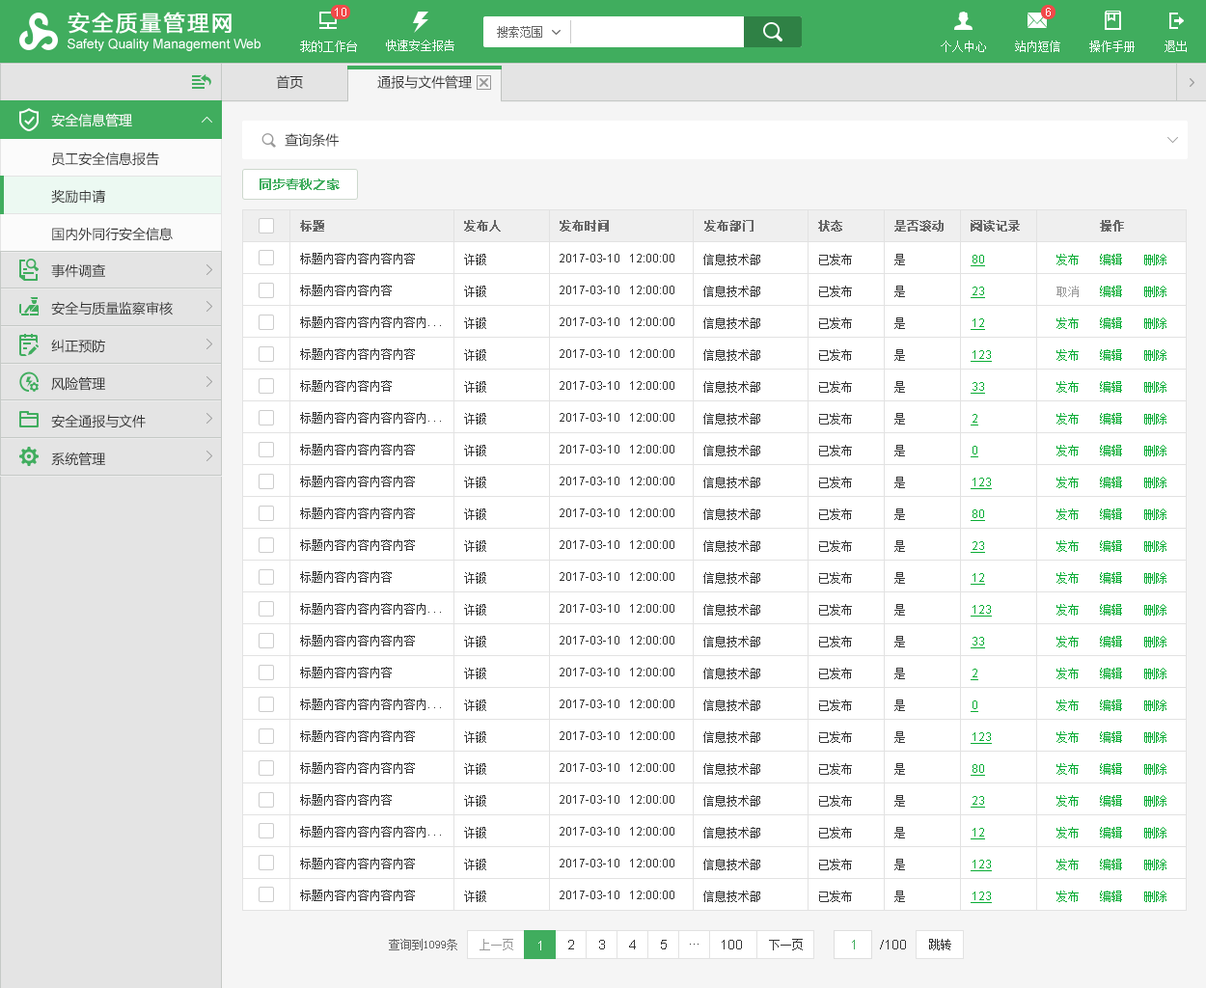
<style>
.page{position:relative;width:1206px;height:988px;background:#ffffff}
.page>*{position:absolute;margin:0}
.t1{font:13.5px "MicrosoftYaHei";color:#333333}
.t2{font:13.5px "MicrosoftYaHei";color:#ffffff}
.t3{font:13.5px/37.6px "MicrosoftYaHei";color:#333333}
.t4{font:13.5px "MicrosoftYaHei-Bold";color:#40ad5e}
.t5{font:11.6px "SimSun";color:#666666;font-weight:bold}
.t6{font:11.6px/31.9px "SimSun";color:#333333}
.t7{font:11.6px/31.9px "ArialMT";color:#333333}
.t8{font:11.6px/31.9px "ArialMT";color:#09ac35;text-decoration:underline}
.t9{font:11.6px/31.9px "SimSun";color:#09ac35}
.t10{font:11.6px/31.9px "SimSun";color:#999999}
.t11{font:11.6px "SimSun";color:#666666}
.t12{font:11.6px "SimSun";color:#999999}
.t13{font:13.5px "ArialMT";color:#ffffff}
.t14{font:13.5px "ArialMT";color:#333333}
.t15{font:11.6px "SimSun";color:#333333}
.t16{font:13.5px "ArialMT";color:#40ad5e}
</style>
<div class="page">
<p class="t1" style="left:276px;top:75px;width:27px;height:14px">首页</p>
<p class="t1" style="left:377px;top:75px;width:95px;height:14px">通报与文件管理</p>
<p class="t2" style="left:51px;top:113px;width:81px;height:14px">安全信息管理</p>
<p class="t1" style="left:285px;top:133px;width:54px;height:14px">查询条件</p>
<p class="t3" style="left:51px;top:152px;width:122px;height:89px">员工安全信息报告<br>奖励申请<br>国内外同行安全信息</p>
<p class="t4" style="left:260px;top:179px;width:80px;height:11px">同步春秋之家</p>
<p class="t5" style="left:300px;top:220px;width:24px;height:12px">标题</p>
<p class="t5" style="left:464px;top:220px;width:37px;height:12px">发布人</p>
<p class="t5" style="left:560px;top:220px;width:49px;height:12px">发布时间</p>
<p class="t5" style="left:705px;top:220px;width:49px;height:12px">发布部门</p>
<p class="t5" style="left:818px;top:220px;width:25px;height:12px">状态</p>
<p class="t5" style="left:895px;top:220px;width:49px;height:12px">是否滚动</p>
<p class="t5" style="left:971px;top:220px;width:49px;height:12px">阅读记录</p>
<p class="t5" style="left:1100px;top:220px;width:24px;height:12px">操作</p>
<p class="t6" style="left:300px;top:253px;width:141px;height:648px">标题内容内容内容内容<br>标题内容内容内容<br>标题内容内容内容内容内...<br>标题内容内容内容内容<br>标题内容内容内容<br>标题内容内容内容内容内...<br>标题内容内容内容内容<br>标题内容内容内容内容<br>标题内容内容内容内容<br>标题内容内容内容内容<br>标题内容内容内容<br>标题内容内容内容内容内...<br>标题内容内容内容内容<br>标题内容内容内容<br>标题内容内容内容内容内...<br>标题内容内容内容内容<br>标题内容内容内容内容<br>标题内容内容内容<br>标题内容内容内容内容内...<br>标题内容内容内容内容<br>标题内容内容内容内容</p>
<p class="t6" style="left:464px;top:254px;width:22px;height:648px">许锻<br>许锻<br>许锻<br>许锻<br>许锻<br>许锻<br>许锻<br>许锻<br>许锻<br>许锻<br>许锻<br>许锻<br>许锻<br>许锻<br>许锻<br>许锻<br>许锻<br>许锻<br>许锻<br>许锻<br>许锻</p>
<p class="t7" style="left:560px;top:254px;width:115px;height:646px">2017-03-10   12:00:00<br>2017-03-10   12:00:00<br>2017-03-10   12:00:00<br>2017-03-10   12:00:00<br>2017-03-10   12:00:00<br>2017-03-10   12:00:00<br>2017-03-10   12:00:00<br>2017-03-10   12:00:00<br>2017-03-10   12:00:00<br>2017-03-10   12:00:00<br>2017-03-10   12:00:00<br>2017-03-10   12:00:00<br>2017-03-10   12:00:00<br>2017-03-10   12:00:00<br>2017-03-10   12:00:00<br>2017-03-10   12:00:00<br>2017-03-10   12:00:00<br>2017-03-10   12:00:00<br>2017-03-10   12:00:00<br>2017-03-10   12:00:00<br>2017-03-10   12:00:00</p>
<p class="t6" style="left:704px;top:254px;width:57px;height:648px">信息技术部<br>信息技术部<br>信息技术部<br>信息技术部<br>信息技术部<br>信息技术部<br>信息技术部<br>信息技术部<br>信息技术部<br>信息技术部<br>信息技术部<br>信息技术部<br>信息技术部<br>信息技术部<br>信息技术部<br>信息技术部<br>信息技术部<br>信息技术部<br>信息技术部<br>信息技术部<br>信息技术部</p>
<p class="t6" style="left:819px;top:254px;width:33px;height:648px">已发布<br>已发布<br>已发布<br>已发布<br>已发布<br>已发布<br>已发布<br>已发布<br>已发布<br>已发布<br>已发布<br>已发布<br>已发布<br>已发布<br>已发布<br>已发布<br>已发布<br>已发布<br>已发布<br>已发布<br>已发布</p>
<p class="t6" style="left:895px;top:254px;width:10px;height:648px">是<br>是<br>是<br>是<br>是<br>是<br>是<br>是<br>是<br>是<br>是<br>是<br>是<br>是<br>是<br>是<br>是<br>是<br>是<br>是<br>是</p>
<p class="t8" style="left:971px;top:255px;width:21px;height:648px">80<br>23<br>12<br>123<br>33<br>2<br>0<br>123<br>80<br>23<br>12<br>123<br>33<br>2<br>0<br>123<br>80<br>23<br>12<br>123<br>123</p>
<p class="t9" style="left:1057px;top:254px;width:22px;height:648px">发布<br><span class="t10">取消<br></span>发布<br>发布<br>发布<br>发布<br>发布<br>发布<br>发布<br>发布<br>发布<br>发布<br>发布<br>发布<br>发布<br>发布<br>发布<br>发布<br>发布<br>发布<br>发布</p>
<p class="t9" style="left:1100px;top:254px;width:23px;height:648px">编辑<br>编辑<br>编辑<br>编辑<br>编辑<br>编辑<br>编辑<br>编辑<br>编辑<br>编辑<br>编辑<br>编辑<br>编辑<br>编辑<br>编辑<br>编辑<br>编辑<br>编辑<br>编辑<br>编辑<br>编辑</p>
<p class="t9" style="left:1145px;top:254px;width:22px;height:648px">删除<br>删除<br>删除<br>删除<br>删除<br>删除<br>删除<br>删除<br>删除<br>删除<br>删除<br>删除<br>删除<br>删除<br>删除<br>删除<br>删除<br>删除<br>删除<br>删除<br>删除</p>
<p class="t3" style="left:51px;top:263px;width:122px;height:203px">事件调查<br>安全与质量监察审核<br>纠正预防<br>风险管理<br>安全通报与文件<br>系统管理</p>
<p class="t11" style="left:389px;top:939px;width:68px;height:12px">查询到1099条</p>
<p class="t12" style="left:480px;top:939px;width:33px;height:12px">上一页</p>
<p class="t13" style="left:539px;top:941px;width:2px;height:10px">1</p>
<p class="t14" style="left:568px;top:940px;width:6px;height:10px">2</p>
<p class="t14" style="left:599px;top:940px;width:6px;height:10px">3</p>
<p class="t14" style="left:629px;top:940px;width:7px;height:10px">4</p>
<p class="t14" style="left:661px;top:940px;width:6px;height:10px">5</p>
<p class="t14" style="left:722px;top:940px;width:20px;height:10px">100</p>
<p class="t15" style="left:769px;top:939px;width:34px;height:12px">下一页</p>
<p class="t16" style="left:852px;top:940px;width:3px;height:10px">1</p>
<p class="t14" style="left:880px;top:940px;width:26px;height:10px">/100</p>
<p class="t15" style="left:929px;top:939px;width:23px;height:12px">跳转</p>
<p class="t14" style="left:690px;top:944px;width:9px;height:1px">...</p>
</div>
